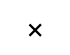
<style>
.page{position:relative;width:70px;height:55px;background:#ffffff}
.page>*{position:absolute;margin:0}
.t1{font:31.8px "DroidSans";color:#000000}
</style>
<div class="page">
<p class="t1" style="left:28px;top:23px;width:14px;height:14px">×</p>
</div>
